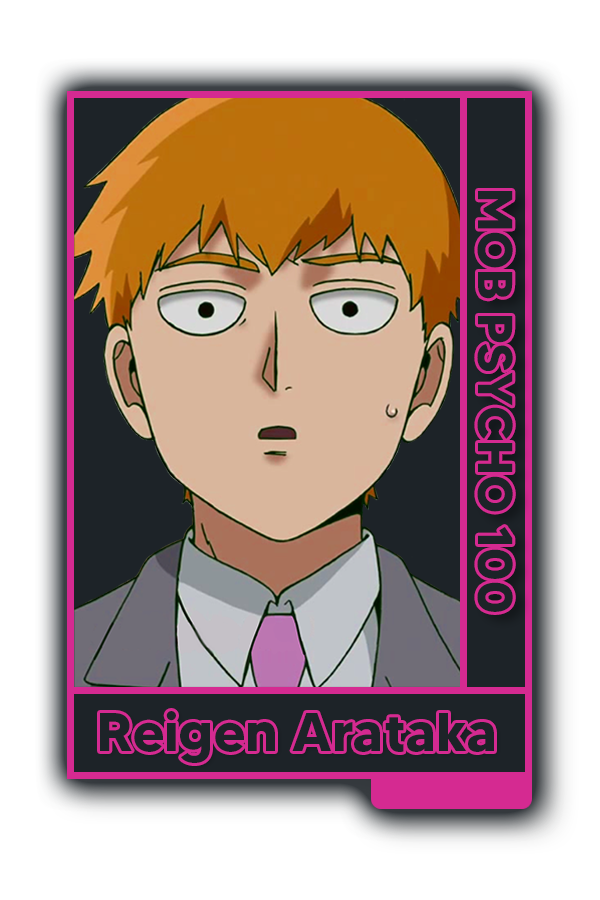
<style>
.page{position:relative;width:600px;height:900px;background:#ffffff}
.page>*{position:absolute;margin:0}
.t1{font:48.8px "MADETOMMY-Bold";color:#1d2328}
.t2{font:54.6px "MADETOMMY-Bold";color:#1d2328}
</style>
<div class="page">
<p class="t1" style="left:477px;top:191px;width:36px;height:421px;rotate:90deg">MOB PSYCHO 100</p>
<p class="t2" style="left:100px;top:711px;width:394px;height:52px">Reigen Arataka</p>
</div>
